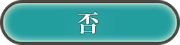
<style>
.page{position:relative;width:180px;height:45px}
.page>*{position:absolute;margin:0}
.t1{font:24px "RyuminPr6N-ExBold";color:#fff6f1}
</style>
<div class="page">
<p class="t1" style="left:77px;top:12px;width:21px;height:22px">否</p>
</div>
